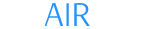
<style>
.page{position:relative;width:144px;height:29px;background:#ffffff}
.page>*{position:absolute;margin:0}
.t1{font:36px "FreightNeoProLight-Regular";color:#2893ff}
.t2{font:36px "FreightNeoProLight-Regular";color:#ffffff}
</style>
<div class="page">
<p class="t1" style="left:6px;top:2px;width:132px;height:25px"><span class="t2">CL</span>AIR<span class="t2">ITY</span></p>
</div>
